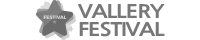
<style>
.page{position:relative;width:200px;height:40px;background:#ffffff}
.page>*{position:absolute;margin:0}
.t1{font:18px/18px "NanumGothicExtraBold";letter-spacing:-0.05em;color:#777777;text-transform:uppercase;scale:1.22 1}
</style>
<div class="page">
<p class="t1" style="left:78px;top:4px;width:87px;height:33px;text-align:center">Vallery<br>Festival</p>
</div>
